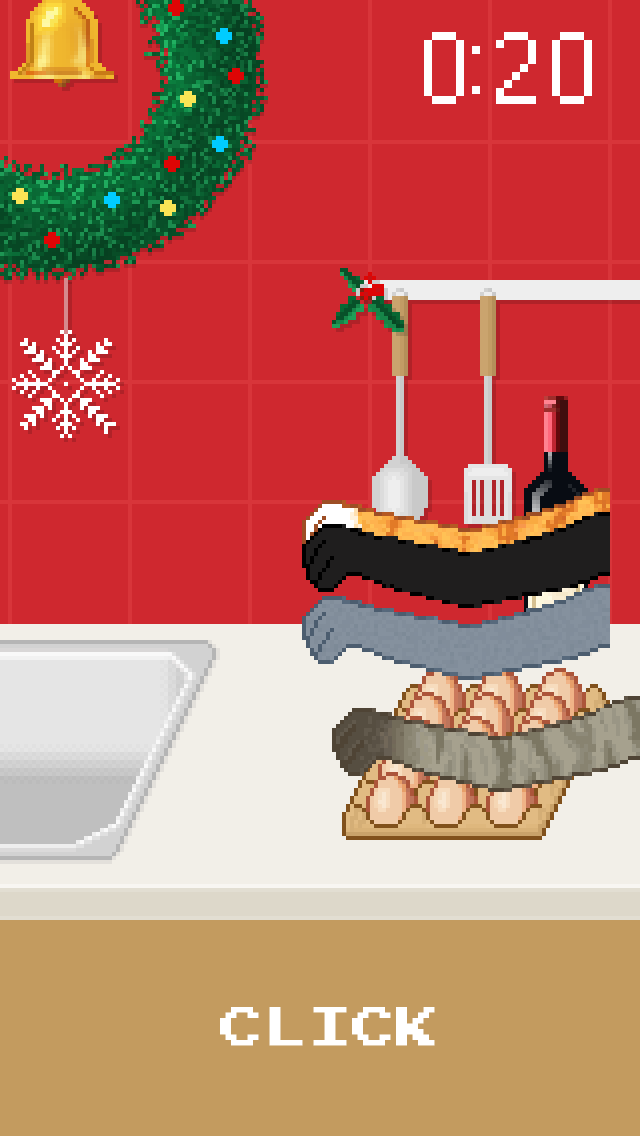
<style>
.page{position:relative;width:640px;height:1136px;background:#cf282f}
.page>*{position:absolute;margin:0}
.t1{font:128px "rainyhearts";color:#ffffff}
.t2{font:44px "PressStart2P";color:#ffffff;text-transform:uppercase}
</style>
<div class="page">
<p class="t1" style="left:424px;top:32px;width:168px;height:72px">0:20</p>
<p class="t2" style="left:220px;top:1007px;width:215px;height:39px">Click</p>
</div>
